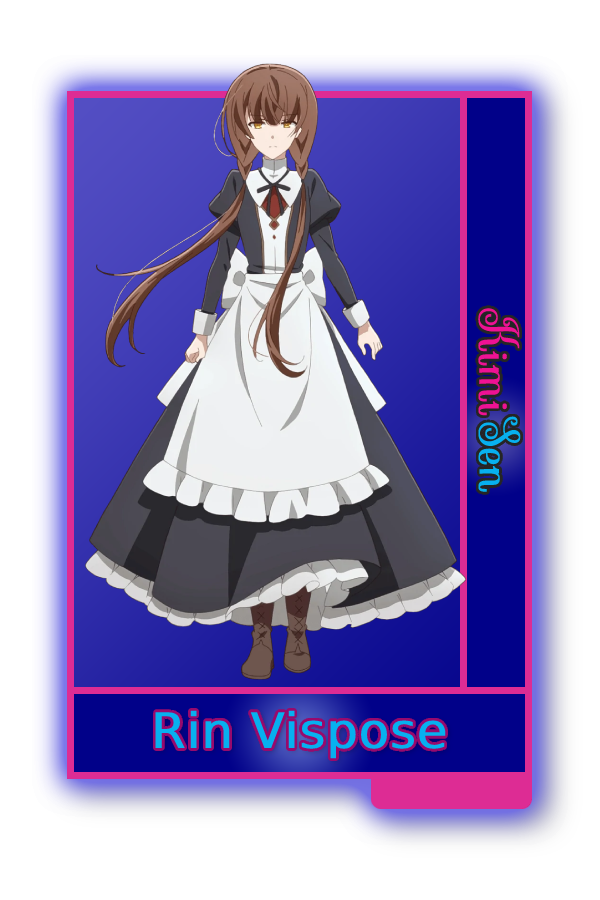
<style>
.page{position:relative;width:600px;height:900px;background:#ffffff}
.page>*{position:absolute;margin:0}
.t1{font:48.8px "Sevillana-Regular";color:#ee1294;font-weight:bold}
.t2{font:48.8px "Sevillana-Regular";color:#07b0ef;font-weight:bold}
.t3{font:49px "CoolveticaRg-Regular";color:#07b0ef;font-weight:bold}
</style>
<div class="page">
<p class="t1" style="left:478px;top:308px;width:43px;height:184px;rotate:90deg">Kimi<span class="t2">Sen</span></p>
<p class="t3" style="left:155px;top:710px;width:291px;height:49px">Rin Vispose</p>
</div>
